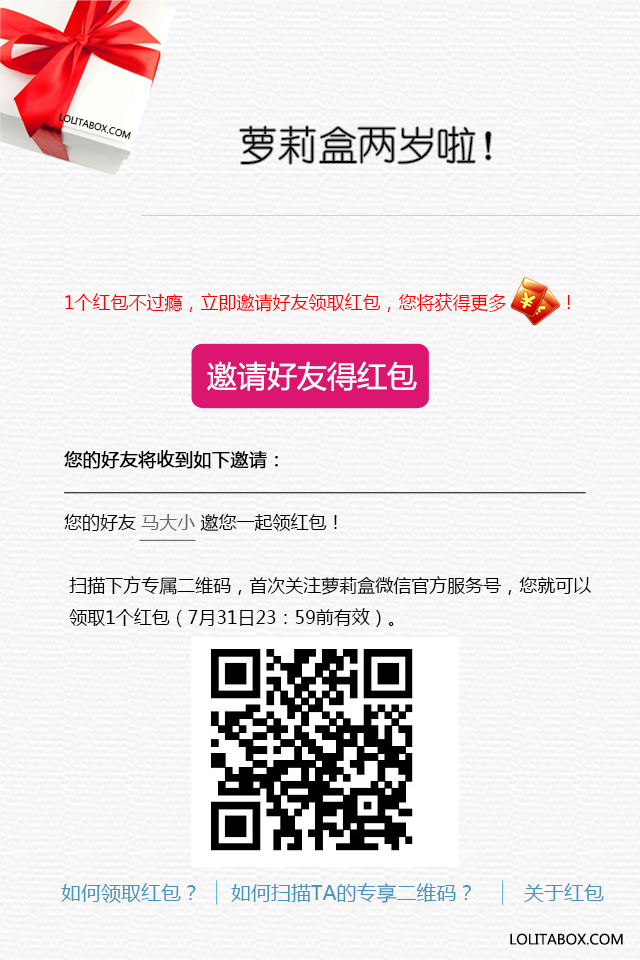
<style>
.page{position:relative;width:640px;height:960px}
.page>*{position:absolute;margin:0}
.t1{font:9px "MicrosoftYaHei";color:#000000}
.t2{font:39.8px "YouYuan";color:#000000}
.t3{font:18px "MicrosoftYaHei";color:#000000}
.t4{font:18px "MicrosoftYaHei";color:#ff0000}
.t5{font:18px "MicrosoftYaHei";color:#000000;font-weight:bold}
.t6{font:18px "MicrosoftYaHei";color:#696969}
.t7{font:30px "MicrosoftYaHei";color:#ffffff}
.t8{font:20px "MicrosoftYaHei";color:#4695bd}
.t9{font:14px "MicrosoftYaHei";color:#000000}
</style>
<div class="page">
<p class="t1" style="left:59px;top:113px;width:72px;height:27px;rotate:15deg">LOLITABOX.COM</p>
<p class="t2" style="left:239px;top:126px;width:252px;height:38px">萝莉盒两岁啦！</p>
<p class="t3" style="left:64px;top:293px;width:527px;height:334px"><span class="t4">1个红包不过瘾，立即邀请好友领取红包，您将获得更多          ！<br><br><br><br><br></span><span class="t5">您的好友将收到如下邀请：<br></span><br>您的好友 <span class="t6">马大小</span> 邀您一起领红包！  <br><br> 扫描下方专属二维码，首次关注萝莉盒微信官方服务号，您就可以<br> 领取1个红包（7月31日23：59前有效）。</p>
<p class="t7" style="left:207px;top:361px;width:210px;height:30px">邀请好友得红包</p>
<p class="t8" style="left:61px;top:883px;width:135px;height:20px">如何领取红包？</p>
<p class="t8" style="left:231px;top:883px;width:240px;height:20px">如何扫描TA的专享二维码？</p>
<p class="t8" style="left:524px;top:883px;width:80px;height:19px">关于红包</p>
<p class="t9" style="left:510px;top:933px;width:113px;height:12px">LOLITABOX.COM</p>
</div>
